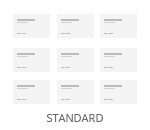
<style>
.page{position:relative;width:150px;height:130px;background:#ffffff}
.page>*{position:absolute;margin:0}
.t1{font:11px "OpenSans";color:#686868;text-transform:uppercase}
</style>
<div class="page">
<p class="t1" style="left:46px;top:114px;width:57px;height:8px">Standard</p>
</div>
